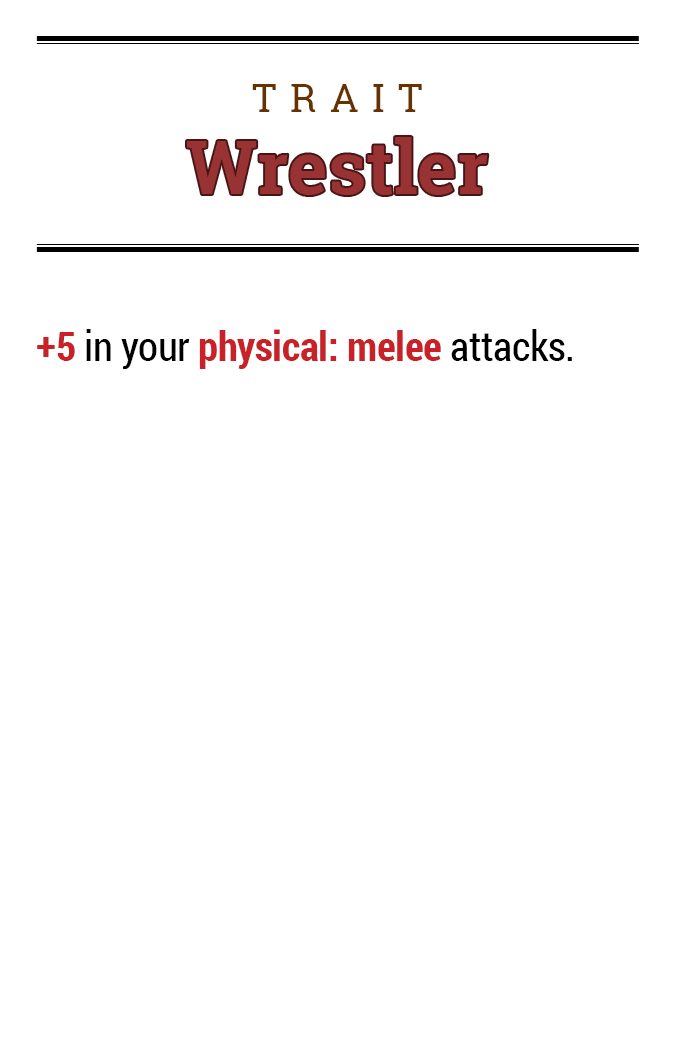
<style>
.page{position:relative;width:675px;height:1050px;background:#ffffff}
.page>*{position:absolute;margin:0}
.t1{font:39.2px "RobotoSlab-Regular";letter-spacing:0.34em;color:#663300}
.t2{font:74.5px "RobotoSlab-Bold";color:#993333}
.t3{font:41.1px "RobotoCondensed-Bold";letter-spacing:-0.01em;color:#c82127}
.t4{font:41.1px "RobotoCondensed-Regular";letter-spacing:-0.01em;color:#000000}
</style>
<div class="page">
<p class="t1" style="left:252px;top:84px;width:170px;height:28px">TRAIT</p>
<p class="t2" style="left:187px;top:137px;width:301px;height:58px">Wrestler</p>
<p class="t3" style="left:37px;top:329px;width:535px;height:40px">+5<span class="t4"> in your </span>physical: melee<span class="t4"> attacks.</span></p>
</div>
